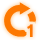
<style>
.page{position:relative;width:40px;height:40px}
.page>*{position:absolute;margin:0}
.t1{font:16px "RodinNTLGPro-B";letter-spacing:0.05em;color:#fd7800}
</style>
<div class="page">
<p class="t1" style="left:27px;top:24px;width:6px;height:13px">1</p>
</div>
